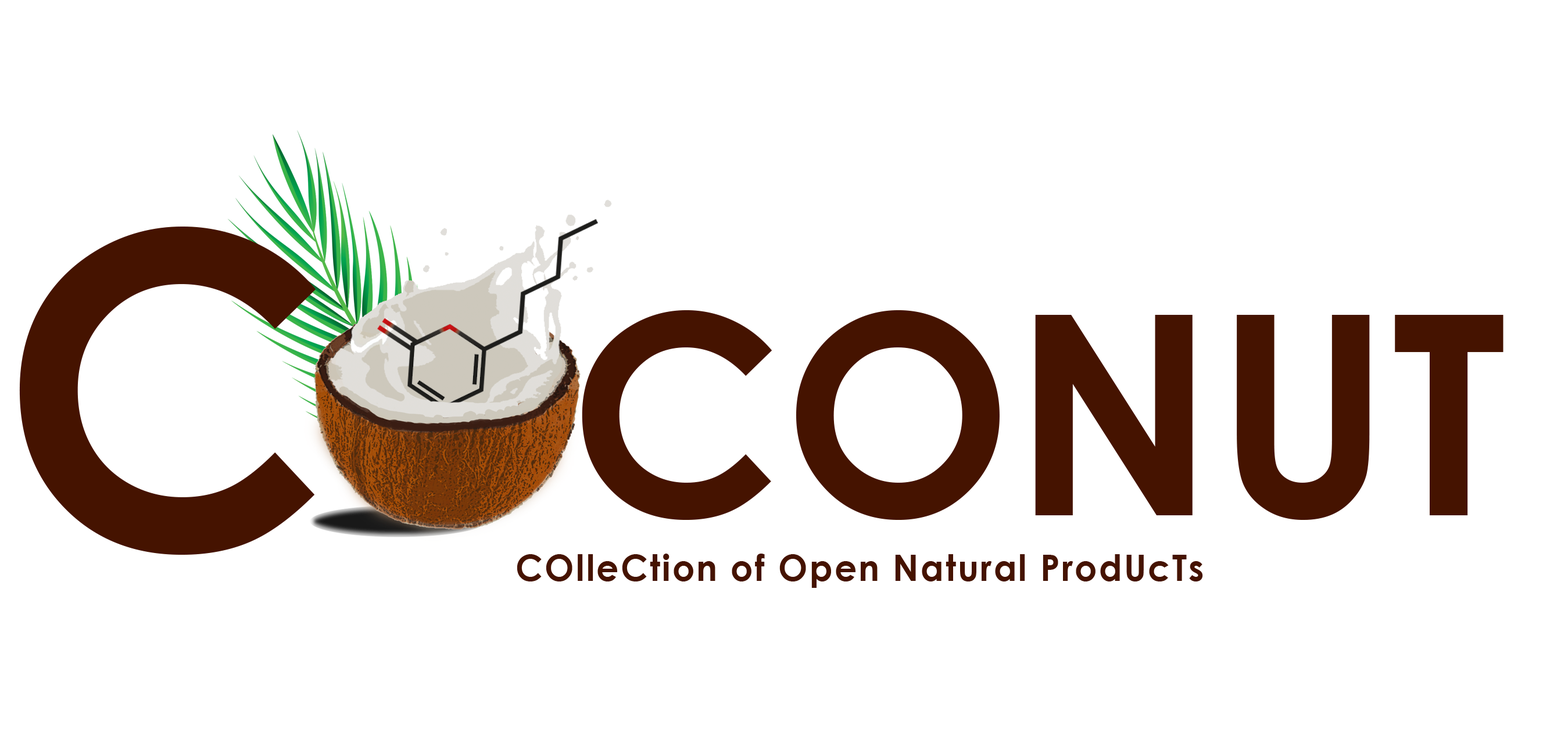
<style>
.page{position:relative;width:1568px;height:754px;background:#ffffff}
.page>*{position:absolute;margin:0}
.t1{font:436px "CenturyGothic-Bold";letter-spacing:0.005em;color:#451300}
.t2{font:279.1px "CenturyGothic-Bold";letter-spacing:0.005em;color:#451300}
.t3{font:36px "CenturyGothic-Bold";letter-spacing:0.05em;color:#451300}
</style>
<div class="page">
<p class="t1" style="left:19px;top:227px;width:297px;height:328px">C</p>
<p class="t2" style="left:352px;top:310px;width:1151px;height:210px">OCONUT</p>
<p class="t3" style="left:517px;top:554px;width:686px;height:34px">COlleCtion of Open Natural ProdUcTs</p>
</div>
